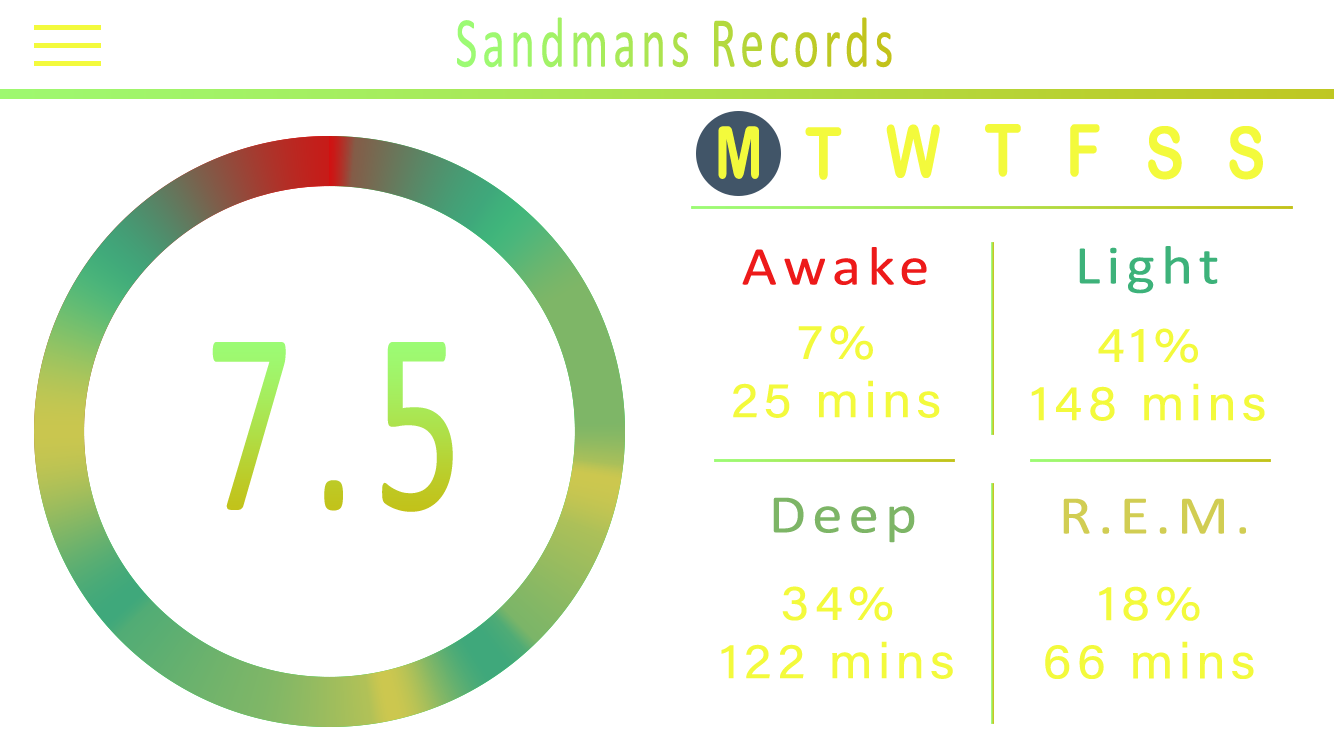
<style>
.page{position:relative;width:1334px;height:750px;background:#ffffff}
.page>*{position:absolute;margin:0}
.t1{font:72px "Calibri";letter-spacing:0.1em;scale:0.67 1}
.t2{font:72px "ArialRoundedMTBold";letter-spacing:0.1em;color:#f3fa3c;scale:0.81 1}
.t3{font:54.8px "Calibri";letter-spacing:0.1em;color:#3db27a;scale:1.11 1}
.t4{font:54.8px "Calibri";letter-spacing:0.1em;color:#ed1a1a;scale:1.11 1}
.t5{font:49.6px/58.3px "AcuminConcept-Regular";letter-spacing:0.1em;color:#f3fa3c;scale:1.05 1}
.t6{font:264.6px "Calibri";letter-spacing:0.1em;scale:0.67 1}
.t7{font:54.8px "Calibri";letter-spacing:0.1em;color:#7db566;scale:1.11 1}
.t8{font:54.8px "Calibri";letter-spacing:0.1em;color:#d1cd53;scale:1.11 1}
</style>
<div class="page">
<p class="t1" style="left:457px;top:17px;width:435px;height:51px">Sandmans Records</p>
<p class="t2" style="left:718px;top:126px;width:41px;height:53px">M</p>
<p class="t2" style="left:886px;top:124px;width:54px;height:54px">W</p>
<p class="t2" style="left:985px;top:124px;width:36px;height:53px">T</p>
<p class="t2" style="left:1070px;top:124px;width:30px;height:53px">F</p>
<p class="t2" style="left:1148px;top:126px;width:34px;height:54px">S</p>
<p class="t2" style="left:1229px;top:126px;width:34px;height:54px">S</p>
<p class="t2" style="left:805px;top:127px;width:37px;height:53px">T</p>
<p class="t3" style="left:1079px;top:246px;width:139px;height:48px">Light</p>
<p class="t4" style="left:742px;top:247px;width:185px;height:38px">Awake</p>
<p class="t5" style="left:733px;top:325px;width:207px;height:93px;text-align:center">7%<br>25 mins</p>
<p class="t5" style="left:1031px;top:328px;width:234px;height:93px;text-align:center">41%<br>148 mins</p>
<p class="t6" style="left:212px;top:342px;width:241px;height:170px">7.5</p>
<p class="t7" style="left:773px;top:497px;width:142px;height:46px">Deep</p>
<p class="t8" style="left:1063px;top:498px;width:183px;height:36px">R.E.M.</p>
<p class="t5" style="left:721px;top:586px;width:232px;height:93px;text-align:center">34%<br>122 mins</p>
<p class="t5" style="left:1045px;top:586px;width:209px;height:93px;text-align:center">18%<br>66 mins</p>
</div>
